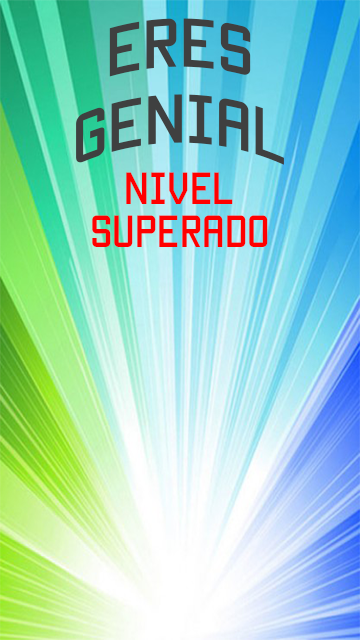
<style>
.page{position:relative;width:360px;height:640px}
.page>*{position:absolute;margin:0}
.t1{font:55px "Manteka";color:#3f4040}
.t2{font:36px "Manteka";color:#ff0000}
</style>
<div class="page">
<p class="t1" style="left:109px;top:18px;width:142px;height:59px">ERES</p>
<p class="t1" style="left:76px;top:94px;width:208px;height:71px">GENIAl</p>
<p class="t2" style="left:92px;top:172px;width:176px;height:75px;text-align:center">NIVEL <br>SUPERADO</p>
</div>
